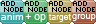
<style>
.page{position:relative;width:96px;height:24px}
.page>*{position:absolute;margin:0}
.t1{font:10.4px "Mangal";color:#ffffff}
.t2{font:10.7px "Mangal";color:#ffffff;scale:0.92 1}
.t3{font:10.4px "Mangal";color:#ffffff;scale:0.79 1}
.t4{font:9px "Mangal";color:#ffffff}
</style>
<div class="page">
<p class="t1" style="left:1px;top:13px;width:23px;height:7px">anim</p>
<p class="t2" style="left:25px;top:14px;width:21px;height:8px">+ op</p>
<p class="t3" style="left:48px;top:14px;width:23px;height:8px">target</p>
<p class="t4" style="left:72px;top:14px;width:24px;height:7px">group</p>
</div>
